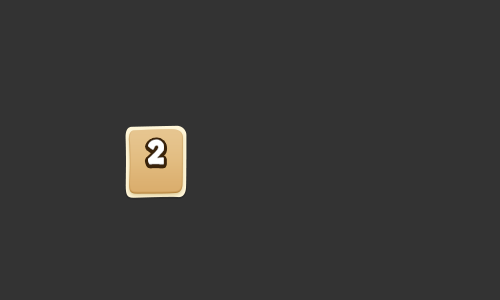
<style>
.page{position:relative;width:500px;height:300px;background:#333333}
.page>*{position:absolute;margin:0}
.t1{font:33px "Skranji-Bold";letter-spacing:0.02em;color:#ffffff;scale:0.96 1}
</style>
<div class="page">
<p class="t1" style="left:148px;top:139px;width:16px;height:26px">2</p>
</div>
